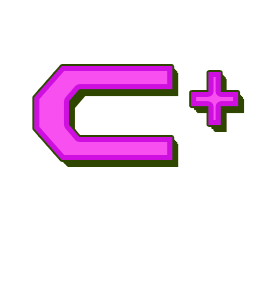
<style>
.page{position:relative;width:256px;height:296px;background:#ffffff}
.page>*{position:absolute;margin:0}
.t1{font:160px "Extremist";letter-spacing:-0.2em;scale:0.88 1}
.t2{font:160px "Quantify";letter-spacing:-0.2em;scale:0.88 1}
</style>
<div class="page">
<p class="t1" style="left:34px;top:66px;width:205px;height:94px">C<span class="t2">+</span></p>
</div>
